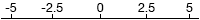
<style>
.page{position:relative;width:200px;height:20px;background:#ffffff}
.page>*{position:absolute;margin:0}
.t1{font:12.5px "HelveticaNeue";color:#000000}
</style>
<div class="page">
<p class="t1" style="left:5px;top:3px;width:12px;height:9px">-5</p>
<p class="t1" style="left:41px;top:3px;width:22px;height:9px">-2.5</p>
<p class="t1" style="left:97px;top:3px;width:7px;height:9px">0</p>
<p class="t1" style="left:138px;top:3px;width:17px;height:9px">2.5</p>
<p class="t1" style="left:186px;top:3px;width:7px;height:9px">5</p>
</div>
